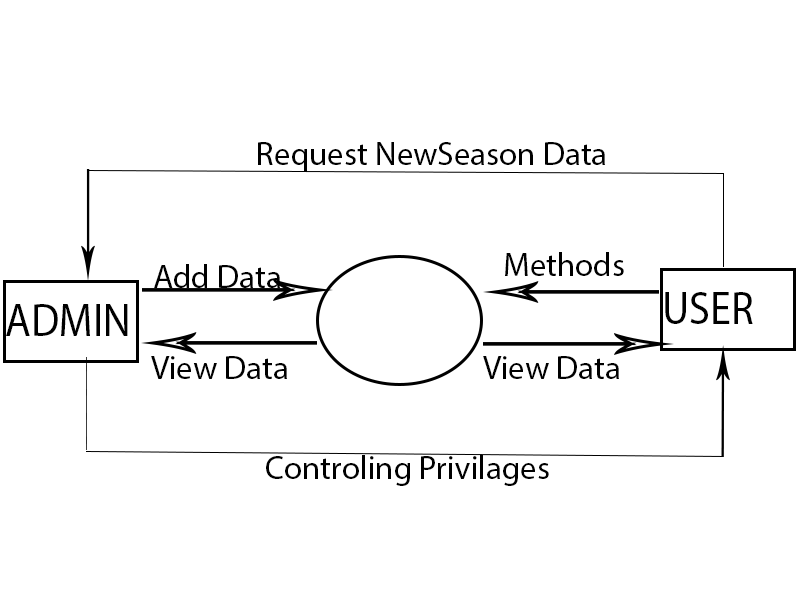
<style>
.page{position:relative;width:800px;height:600px;background:#ffffff}
.page>*{position:absolute;margin:0}
.t1{font:33px "MyriadPro-Regular";color:#000000}
.t2{font:46.1px "MyriadPro-Regular";color:#000000;scale:0.91 1}
</style>
<div class="page">
<p class="t1" style="left:258px;top:142px;width:347px;height:30px">Request NewSeason Data</p>
<p class="t1" style="left:505px;top:252px;width:119px;height:24px">Methods</p>
<p class="t1" style="left:154px;top:264px;width:126px;height:24px">Add Data</p>
<p class="t2" style="left:665px;top:292px;width:88px;height:32px">USER</p>
<p class="t2" style="left:6px;top:304px;width:122px;height:32px">ADMIN</p>
<p class="t1" style="left:151px;top:356px;width:136px;height:23px">View Data</p>
<p class="t1" style="left:483px;top:356px;width:136px;height:23px">View Data</p>
<p class="t1" style="left:266px;top:455px;width:283px;height:31px">Controling Privilages</p>
</div>
